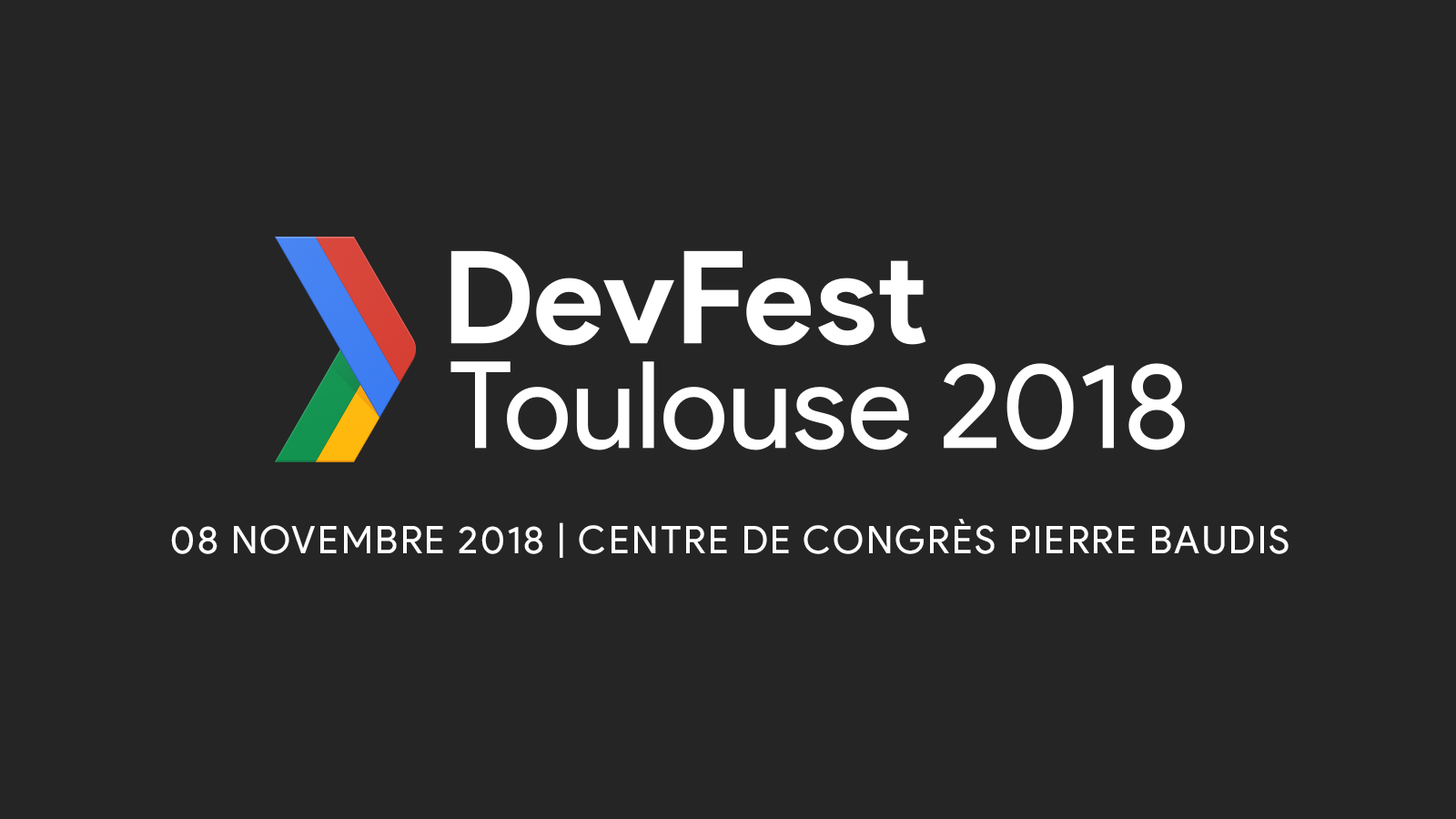
<style>
.page{position:relative;width:1456px;height:819px;background:#252525}
.page>*{position:absolute;margin:0}
.t1{font:38.2px "ProductSans-Regular";letter-spacing:0.06em;color:#ffffff;text-transform:uppercase}
</style>
<div class="page">
<p class="t1" style="left:171px;top:519px;width:1118px;height:39px">08 Novembre 2018 | Centre de Congrès Pierre Baudis</p>
</div>
